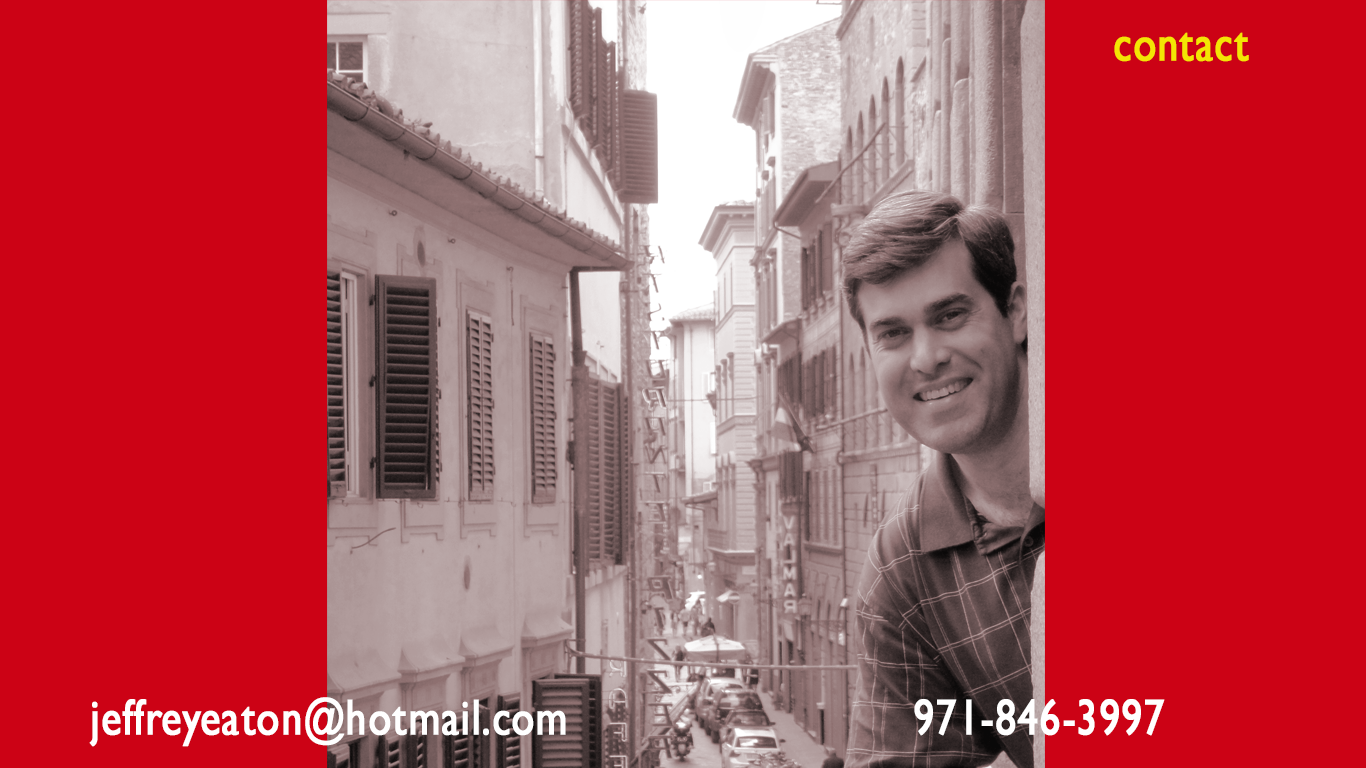
<style>
.page{position:relative;width:1366px;height:768px;background:#cc0215}
.page>*{position:absolute;margin:0}
.t1{font:50.4px "GillSansMT";letter-spacing:0.01em;color:#f3e504;font-weight:bold;scale:0.81 1}
.t2{font:50.4px "GillSansMT";letter-spacing:0.01em;color:#ffffff;font-weight:bold;scale:0.81 1}
</style>
<div class="page">
<p class="t1" style="left:1114px;top:32px;width:135px;height:30px">contact</p>
<p class="t2" style="left:89px;top:697px;width:477px;height:50px">jeffreyeaton@hotmail.com</p>
<p class="t2" style="left:914px;top:699px;width:251px;height:37px">971-846-3997</p>
</div>
